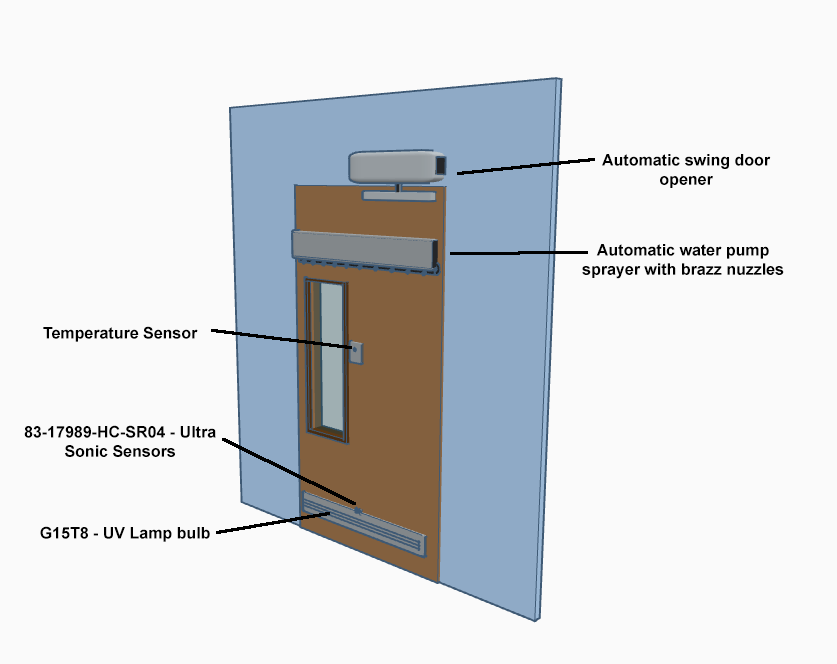
<style>
.page{position:relative;width:837px;height:664px;background:#fafafa}
.page>*{position:absolute;margin:0}
.t1{font:16px "Arial-BoldMT";color:#000000}
</style>
<div class="page">
<p class="t1" style="left:602px;top:154px;width:169px;height:34px;text-align:center">Automatic swing door opener</p>
<p class="t1" style="left:582px;top:244px;width:202px;height:35px;text-align:center">Automatic water pump sprayer with brazz nuzzles</p>
<p class="t1" style="left:43px;top:326px;width:155px;height:16px">Temperature Sensor</p>
<p class="t1" style="left:24px;top:425px;width:192px;height:32px;text-align:center">83-17989-HC-SR04 - Ultra Sonic Sensors</p>
<p class="t1" style="left:40px;top:526px;width:170px;height:16px">G15T8 - UV Lamp bulb</p>
</div>
